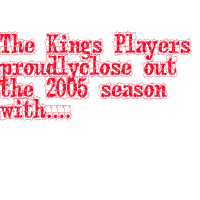
<style>
.page{position:relative;width:200px;height:200px;background:#ffffff}
.page>*{position:absolute;margin:0}
.t1{font:18px "puzzlefacelemonde";color:#f00e2c}
</style>
<div class="page">
<p class="t1" style="left:0px;top:31px;width:200px;height:147px">The Kings Players proudlyclose out the 2005 season with....</p>
</div>
